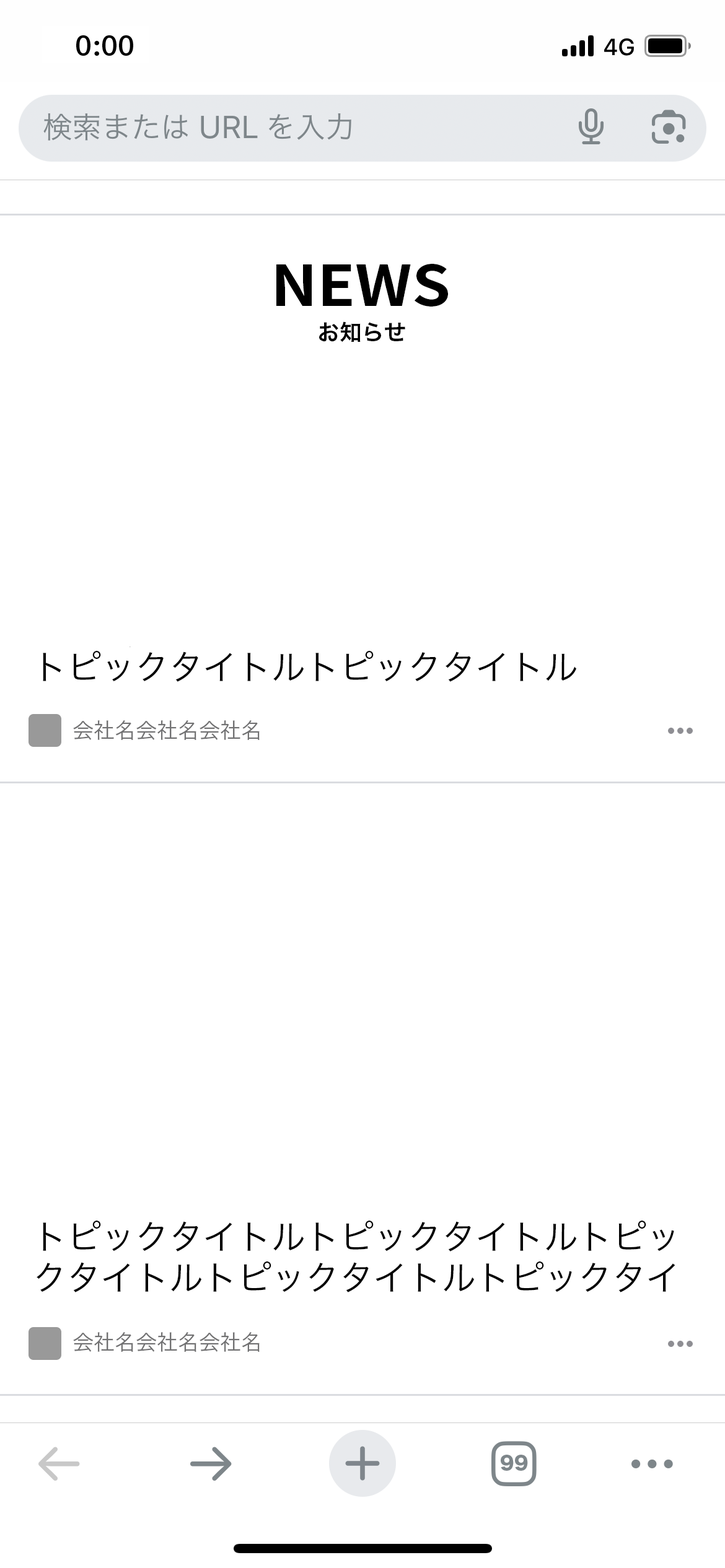
<style>
.page{position:relative;width:725px;height:1568px;background:#ffffff}
.page>*{position:absolute;margin:0}
.t1{font:55.7px "NotoSansCJKjp-Bold";color:#000000;scale:1.11 1}
.t2{font:22.3px "HiraKakuPro-W6";color:#000000}
.t3{font:34.1px "HiraKakuPro-W3";color:#000000}
.t4{font:21.1px "HiraKakuPro-W3";color:#717172}
</style>
<div class="page">
<p class="t1" style="left:276px;top:264px;width:172px;height:43px">NEWS</p>
<p class="t2" style="left:319px;top:321px;width:86px;height:21px">お知らせ</p>
<p class="t3" style="left:43px;top:651px;width:534px;height:31px">トピックタイトルトピックタイトル</p>
<p class="t4" style="left:73px;top:720px;width:186px;height:20px">会社名会社名会社名</p>
<p class="t3" style="left:37px;top:1221px;width:638px;height:71px">トピックタイトルトピックタイトルトピックタイトルトピックタイトルトピックタイトルトピックタイトル</p>
<p class="t4" style="left:73px;top:1332px;width:186px;height:20px">会社名会社名会社名</p>
</div>
